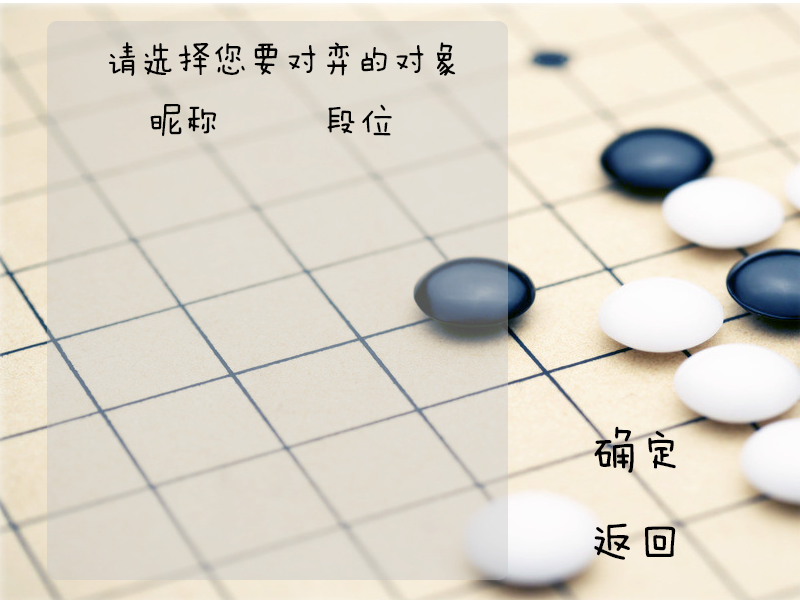
<style>
.page{position:relative;width:800px;height:600px}
.page>*{position:absolute;margin:0}
.t1{font:36px "FZMWJW--GB1-0";color:#030303}
.t2{font:48px "FZMWJW--GB1-0";color:#000000}
</style>
<div class="page">
<p class="t1" style="left:109px;top:42px;width:347px;height:34px">请选择您要对弈的对象</p>
<p class="t1" style="left:150px;top:104px;width:67px;height:33px">昵称</p>
<p class="t1" style="left:327px;top:104px;width:65px;height:32px">段位</p>
<p class="t2" style="left:594px;top:426px;width:82px;height:47px">确定</p>
<p class="t2" style="left:594px;top:523px;width:82px;height:37px">返回</p>
</div>
